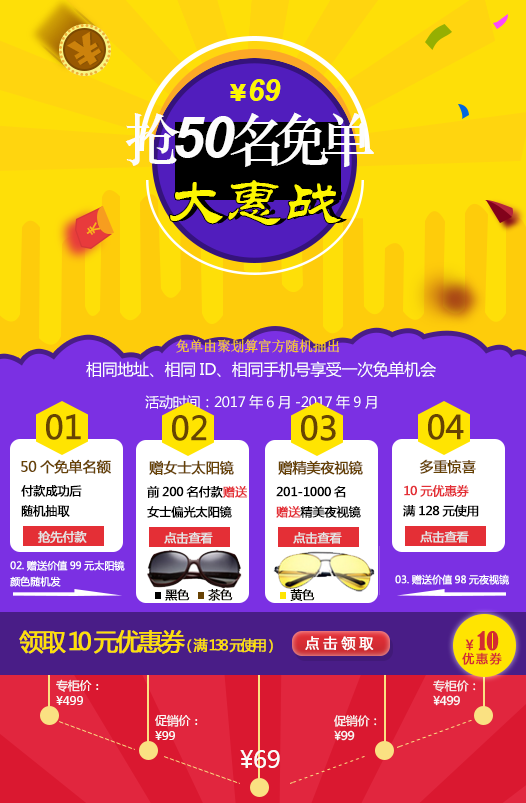
<style>
.page{position:relative;width:526px;height:803px}
.page>*{position:absolute;margin:0}
.t1{font:40px "Arial-Black";letter-spacing:0.06em;color:#cc820c}
.t2{font:30px "Arial-BoldItalicMT";letter-spacing:-0.02em;color:#fcf601}
.t3{font:24px "Arial-Black";letter-spacing:0.06em;color:#fcf601}
.t4{font:57.3px "STZhongsong";letter-spacing:-0.22em;color:#fcfcfc}
.t5{font:57.3px "STZhongsong";letter-spacing:-0.4em;color:#fcfcfc}
.t6{font:57.3px "Arial-BoldItalicMT";letter-spacing:-0.04em;color:#fcfcfc}
.t7{font:57.3px "Arial-BoldItalicMT";letter-spacing:-0.34em;color:#fcfcfc}
.t8{font:60px "STLiti";letter-spacing:-0.02em;color:#fcf601}
.t9{font:18.7px "ArialNarrow";letter-spacing:-0.02em;color:#f9b916}
.t10{font:14px "SimSun";letter-spacing:-0.02em;color:#fecc0b}
.t11{font:16px "MicrosoftYaHei";letter-spacing:-0.02em;color:#fefefe}
.t12{font:14px "MicrosoftYaHei";letter-spacing:-0.02em;color:#fefefe}
.t13{font:32px "MicrosoftYaHei";letter-spacing:-0.02em;color:#674403;font-weight:bold}
.t14{font:14px "MicrosoftYaHei";letter-spacing:-0.02em;color:#674204;font-weight:bold}
.t15{font:12px/20px "MicrosoftYaHei";letter-spacing:-0.02em;color:#000000;font-weight:bold}
.t16{font:12px/20px "MicrosoftYaHei";letter-spacing:-0.02em;color:#e42f36;font-weight:bold}
.t17{font:12px "MicrosoftYaHei";letter-spacing:-0.02em;color:#e4e4e4;font-weight:bold}
.t18{font:10px/16px "MicrosoftYaHei";letter-spacing:-0.02em;color:#ffffff;font-weight:bold}
.t19{font:10px "MicrosoftYaHei";letter-spacing:-0.02em;color:#ffffff;font-weight:bold}
.t20{font:12px "MicrosoftYaHei";letter-spacing:-0.02em;color:#030200;font-weight:bold}
.t21{font:12px "MicrosoftYaHei";letter-spacing:-0.02em;color:#0a0600;font-weight:bold}
.t22{font:12px "MicrosoftYaHei";letter-spacing:-0.02em;color:#070600;font-weight:bold}
.t23{font:14px "MicrosoftYaHei";letter-spacing:-0.2em;color:#fedf08;font-weight:bold}
.t24{font:24px "MicrosoftYaHei";letter-spacing:-0.1em;color:#fedf08;font-weight:bold}
.t25{font:24px "MicrosoftYaHei";letter-spacing:-0.18em;color:#fedf08;font-weight:bold}
.t26{font:24px "MicrosoftYaHei";letter-spacing:-0.2em;color:#fedf08;font-weight:bold}
.t27{font:24px "MicrosoftYaHei";letter-spacing:-0.42em;color:#fedf08;font-weight:bold}
.t28{font:14px "MicrosoftYaHei";letter-spacing:0.26em;color:#ffffff;font-weight:bold}
.t29{font:12px/24px "MicrosoftYaHei";letter-spacing:0.12em;color:#d32c32;font-weight:bold}
.t30{font:14px/24px "MicrosoftYaHei";letter-spacing:0.26em;color:#d32c32;font-weight:bold}
.t31{font:24px/24px "BernardMT-Condensed";letter-spacing:-0.04em;color:#d32c32;font-weight:bold}
.t32{font:12px/15px "MicrosoftYaHei";letter-spacing:-0.02em;color:#faf9f9}
.t33{font:11.9px/14.8px "MicrosoftYaHei";letter-spacing:-0.02em;color:#faf9f9}
.t34{font:24px "MicrosoftYaHei";letter-spacing:-0.02em;color:#faf9f9}
</style>
<div class="page">
<p class="t1" style="left:67px;top:31px;width:34px;height:34px;rotate:-32deg">¥</p>
<p class="t2" style="left:230px;top:79px;width:51px;height:22px"><span class="t3">¥</span>69</p>
<p class="t4" style="left:125px;top:112px;width:249px;height:55px"><span class="t5">抢</span><span class="t6">5</span><span class="t7">0</span>名免单</p>
<p class="t8" style="left:170px;top:180px;width:171px;height:45px">大惠战</p>
<p class="t9" style="left:86px;top:222px;width:15px;height:13px;rotate:54deg">¥</p>
<p class="t10" style="left:176px;top:339px;width:163px;height:14px">免单由聚划算官方随机抽出</p>
<p class="t11" style="left:86px;top:361px;width:350px;height:17px">相同地址、相同ID、相同手机号享受一次免单机会</p>
<p class="t12" style="left:145px;top:395px;width:232px;height:14px">活动时间：2017年6月-2017年9月</p>
<p class="t13" style="left:46px;top:414px;width:35px;height:26px">01</p>
<p class="t13" style="left:428px;top:414px;width:36px;height:26px">04</p>
<p class="t13" style="left:172px;top:415px;width:35px;height:26px">02</p>
<p class="t13" style="left:301px;top:415px;width:35px;height:26px">03</p>
<p class="t14" style="left:21px;top:459px;width:90px;height:15px">50个免单名额</p>
<p class="t14" style="left:149px;top:460px;width:85px;height:15px">赠女士太阳镜</p>
<p class="t14" style="left:278px;top:460px;width:85px;height:15px">赠精美夜视镜</p>
<p class="t14" style="left:419px;top:459px;width:57px;height:15px">多重惊喜</p>
<p class="t15" style="left:21px;top:485px;width:61px;height:32px">付款成功后<br>随机抽取</p>
<p class="t15" style="left:147px;top:486px;width:101px;height:32px">前200名付款<span class="t16">赠送<br></span>女士偏光太阳镜</p>
<p class="t15" style="left:276px;top:486px;width:85px;height:32px">201-1000名<br><span class="t16">赠送</span>精美夜视镜</p>
<p class="t15" style="left:403px;top:485px;width:76px;height:32px"><span class="t16">10元优惠券<br></span>满128元使用</p>
<p class="t17" style="left:38px;top:531px;width:49px;height:12px">抢先付款</p>
<p class="t17" style="left:164px;top:532px;width:49px;height:12px">点击查看</p>
<p class="t17" style="left:293px;top:532px;width:49px;height:12px">点击查看</p>
<p class="t17" style="left:420px;top:531px;width:49px;height:12px">点击查看</p>
<p class="t18" style="left:10px;top:560px;width:115px;height:27px">02.赠送价值99元太阳镜<br>颜色随机发</p>
<p class="t19" style="left:395px;top:574px;width:114px;height:11px">03.赠送价值98元夜视镜</p>
<p class="t20" style="left:165px;top:589px;width:25px;height:12px">黑色</p>
<p class="t21" style="left:208px;top:589px;width:25px;height:12px">茶色</p>
<p class="t22" style="left:290px;top:589px;width:25px;height:12px">黄色</p>
<p class="t23" style="left:19px;top:630px;width:254px;height:24px"><span class="t24">领</span><span class="t25">取</span><span class="t26">10</span><span class="t24">元优惠</span><span class="t27">券</span>（满138元使用）</p>
<p class="t28" style="left:305px;top:636px;width:69px;height:15px">点击领取</p>
<p class="t29" style="left:462px;top:631px;width:40px;height:34px;text-align:center"><span class="t30">¥</span><span class="t31">10<br></span>优惠券</p>
<p class="t32" style="left:56px;top:679px;width:43px;height:26px">专柜价：<br>¥499</p>
<p class="t33" style="left:433px;top:680px;width:43px;height:26px">专柜价：<br>¥499</p>
<p class="t32" style="left:155px;top:714px;width:43px;height:26px">促销价：<br>¥99</p>
<p class="t33" style="left:334px;top:715px;width:43px;height:26px">促销价：<br>¥99</p>
<p class="t34" style="left:240px;top:750px;width:40px;height:18px">¥69</p>
</div>
